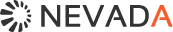
<style>
.page{position:relative;width:173px;height:32px;background:#ffffff}
.page>*{position:absolute;margin:0}
.t1{font:29.9px "Sansation-Regular";letter-spacing:0.01em;color:#333333;text-transform:uppercase;font-weight:bold}
.t2{font:29.9px "Sansation-Regular";letter-spacing:0.01em;color:#f55d2d;text-transform:uppercase;font-weight:bold}
</style>
<div class="page">
<p class="t1" style="left:41px;top:5px;width:132px;height:22px">nevad<span class="t2">a</span></p>
</div>
